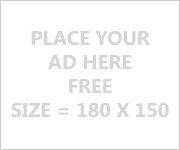
<style>
.page{position:relative;width:180px;height:150px;background:#ffffff}
.page>*{position:absolute;margin:0}
.t1{font:20px "SegoeUI-Bold";color:#d5d5d5}
</style>
<div class="page">
<p class="t1" style="left:11px;top:30px;width:158px;height:88px;text-align:center">PLACE YOUR<br>AD HERE<br>FREE<br>SIZE = 180 X 150</p>
</div>
